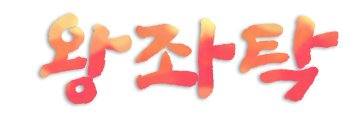
<style>
.page{position:relative;width:360px;height:120px;background:#ffffff}
.page>*{position:absolute;margin:0}
.t1{font:106.2px "SangSangRockOTF";letter-spacing:0.04em}
.t2{font:106.2px "SangSangRockOTF";letter-spacing:0.12em}
</style>
<div class="page">
<p class="t1" style="left:40px;top:13px;width:298px;height:91px">왕좌<span class="t2">탁</span></p>
</div>
